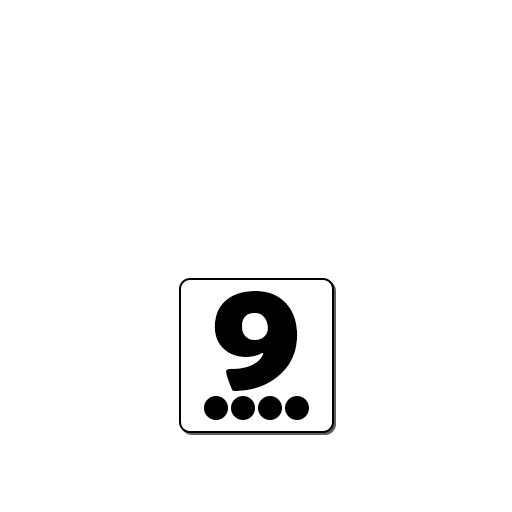
<style>
.page{position:relative;width:512px;height:512px;background:#ffffff}
.page>*{position:absolute;margin:0}
.t1{font:160px "BerlinSansFBDemi-Bold";color:#000000}
</style>
<div class="page">
<p class="t1" style="left:214px;top:291px;width:84px;height:100px">9</p>
</div>
